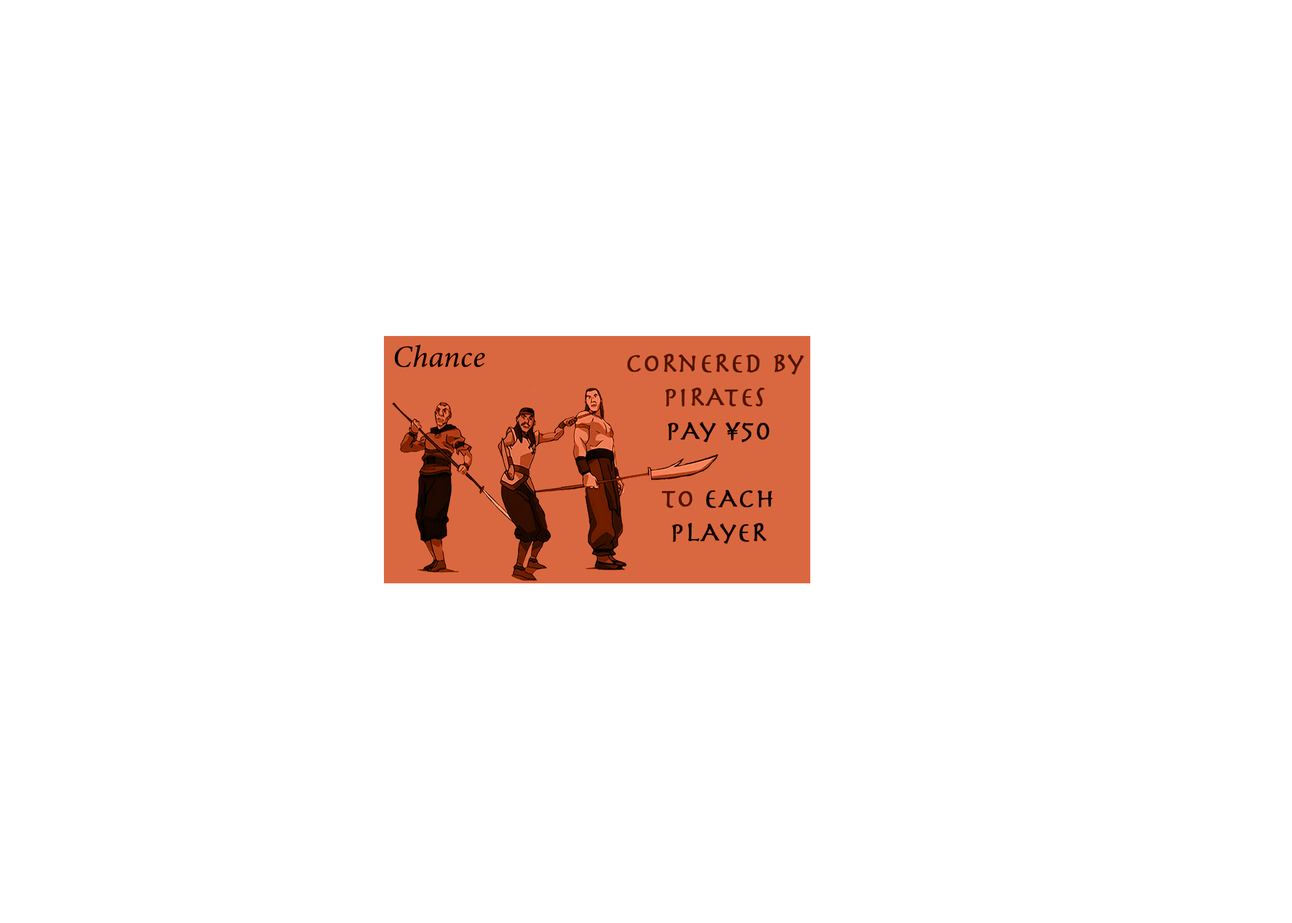
<style>
.page{position:relative;width:1292px;height:923px;background:#ffffff}
.page>*{position:absolute;margin:0}
.t1{font:30.8px "MinionConceptItalic-MediumItalic";color:#000000;font-weight:bold}
.t2{font:28.2px "Herculanum";font-weight:bold}
</style>
<div class="page">
<p class="t1" style="left:394px;top:345px;width:91px;height:22px">Chance</p>
<p class="t2" style="left:627px;top:354px;width:177px;height:190px;text-align:center">coRneRed by <br>piRATES <br>PAy ¥50<br><br>to eAch<br>plAyeR</p>
</div>
